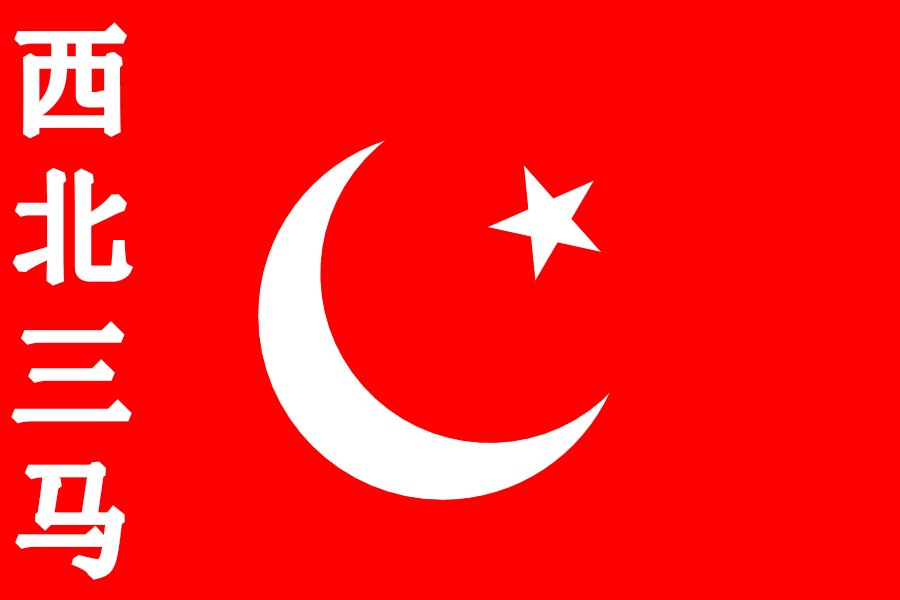
<style>
.page{position:relative;width:900px;height:600px;background:#ff0000}
.page>*{position:absolute;margin:0}
.t1{font:121.9px "SimSun";color:#ffffff;font-weight:bold}
</style>
<div class="page">
<p class="t1" style="left:11px;top:22px;width:122px;height:558px">西<br>北<br>三<br>马</p>
</div>
